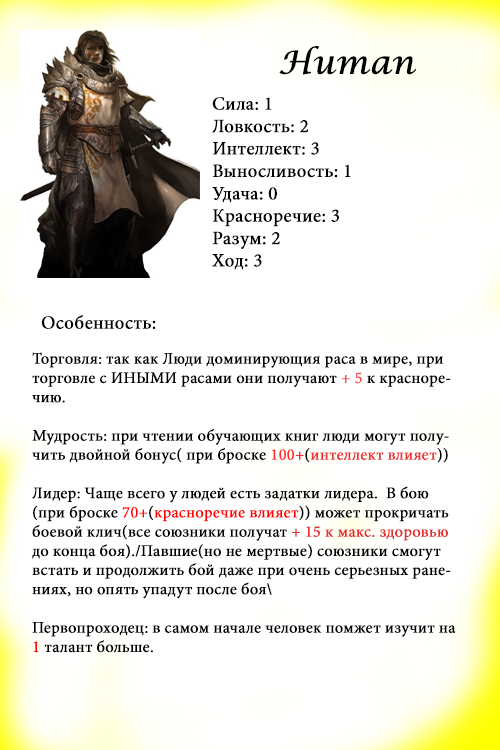
<style>
.page{position:relative;width:500px;height:750px;background:#ffffff}
.page>*{position:absolute;margin:0}
.t1{font:32px "LucidaCalligraphy-Italic";color:#000000;font-weight:bold}
.t2{font:18.7px "MinionPro-Regular";color:#000000;font-weight:bold}
.t3{font:16px "MinionPro-Regular";color:#000000;font-weight:bold}
.t4{font:16px "MinionPro-Regular";color:#fb5050;font-weight:bold}
.t5{font:16px "MinionPro-Regular";color:#ff2b2b;font-weight:bold}
.t6{font:16px "MinionPro-Regular";color:#ee3232;font-weight:bold}
.t7{font:16px "MinionPro-Regular";color:#ff0000;font-weight:bold}
.t8{font:16px "MinionPro-Regular";color:#fe0000;font-weight:bold}
.t9{font:16px "MinionPro-Regular";color:#e43030;font-weight:bold}
</style>
<div class="page">
<p class="t1" style="left:279px;top:46px;width:137px;height:29px">Human</p>
<p class="t2" style="left:212px;top:97px;width:139px;height:173px">Сила: 1<br>Ловкость: 2<br>Интеллект: 3<br>Выносливость: 1<br>Удача: 0<br>Красноречие: 3<br>Разум: 2<br>Ход: 3</p>
<p class="t2" style="left:41px;top:315px;width:115px;height:14px">Особенность:</p>
<p class="t3" style="left:32px;top:352px;width:424px;height:301px">Торговля: так как Люди доминирующия раса в мире, при торговле с ИНЫМИ расами они получают <span class="t4">+ 5</span> к красноречию.<br><br>Мудрость: при чтении обучающих книг люди могут получить двойной бонус( при броске <span class="t5">100+</span>(<span class="t6">интеллект влияет</span>))<br><br>Лидер: Чаще всего у людей есть задатки лидера.  В бою (при броске <span class="t7">70+</span>(<span class="t8">красноречие влияет</span>)) может прокричать боевой клич(все союзники получат <span class="t9">+ 15 к макс. здоровью</span> до конца боя)./Павшие(но не мертвые) союзники смогут встать и продолжить бой даже при очень серьезных ранениях, но опять упадут после боя\<br><br>Первопроходец: в самом начале человек помжет изучит на <span class="t7">1</span> талант больше.</p>
</div>
